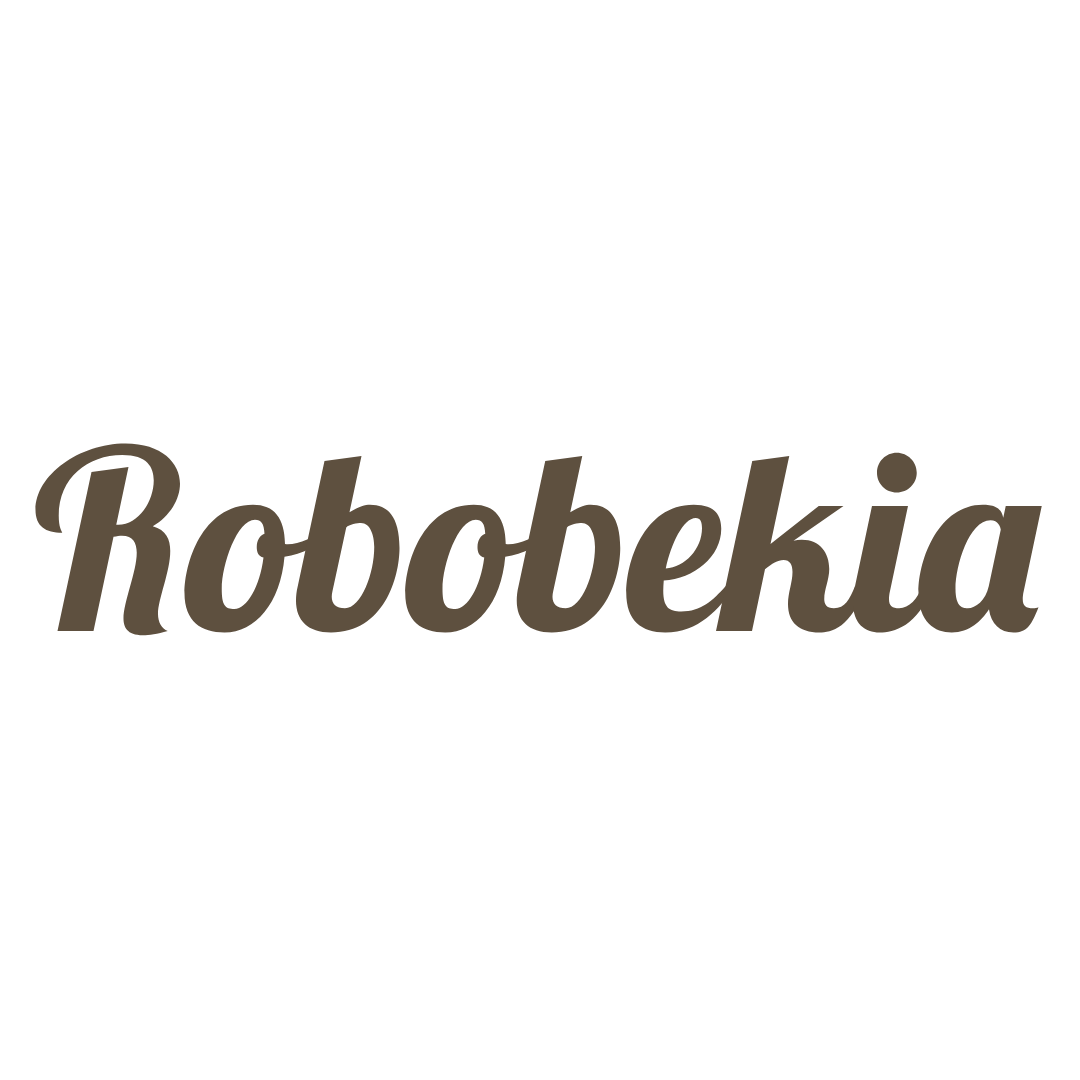
<style>
.page{position:relative;width:1080px;height:1080px;background:#ffffff}
.page>*{position:absolute;margin:0}
.t1{font:250px "LobsterTwo-BoldItalic";color:#5e503f}
</style>
<div class="page">
<p class="t1" style="left:35px;top:443px;width:1007px;height:193px">Robobekia</p>
</div>
